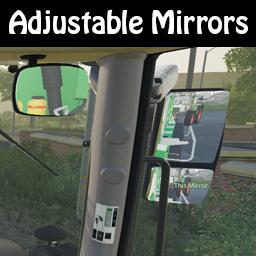
<style>
.page{position:relative;width:256px;height:256px}
.page>*{position:absolute;margin:0}
.t1{font:28px "HoboStd";color:#ffffff}
</style>
<div class="page">
<p class="t1" style="left:9px;top:9px;width:239px;height:25px">Adjustable Mirrors</p>
</div>
